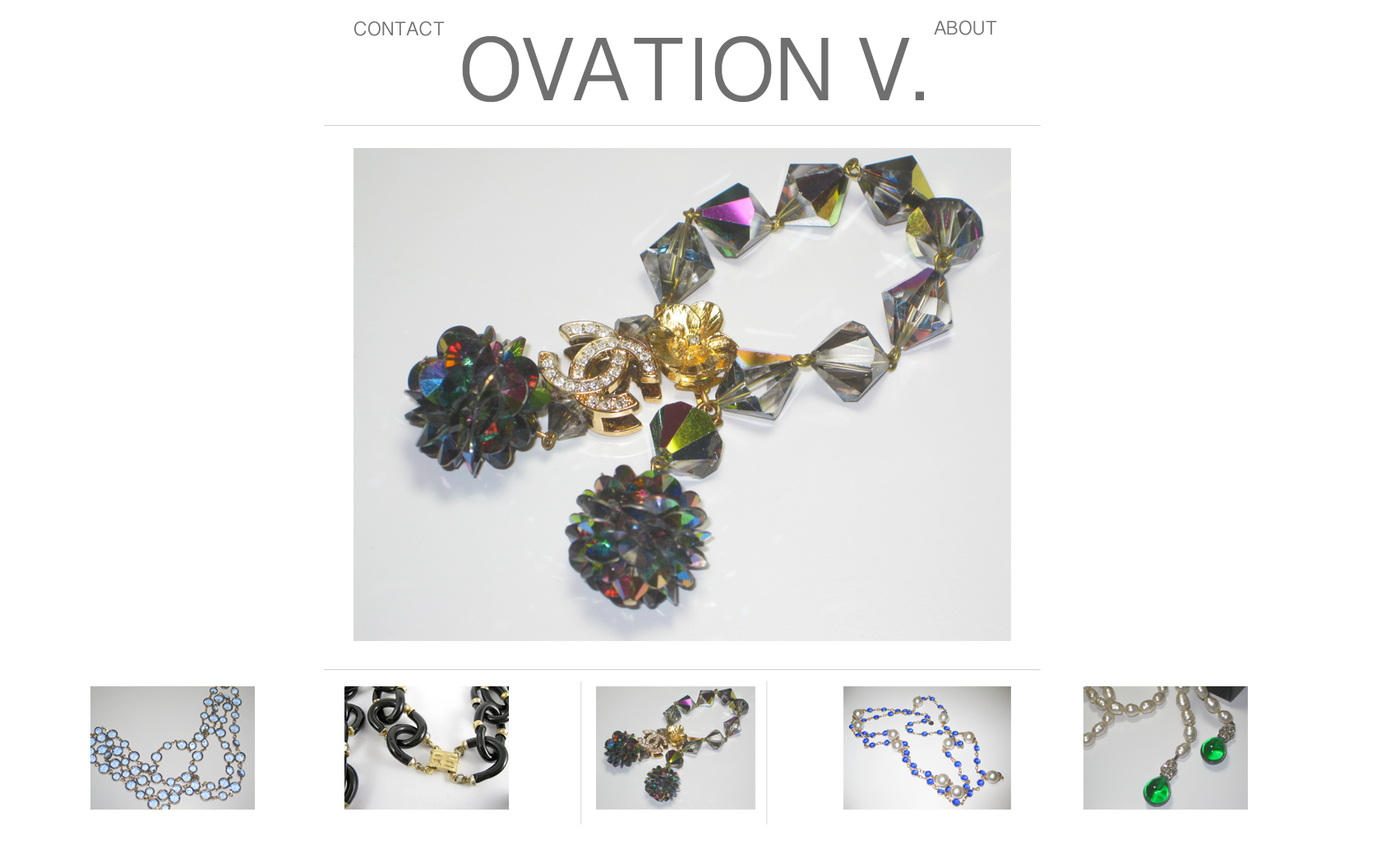
<style>
.page{position:relative;width:1381px;height:863px;background:#ffffff}
.page>*{position:absolute;margin:0}
.t1{font:19.7px "LaoSangamMN";color:#6f6f6f}
.t2{font:90.4px "LaoSangamMN";color:#6f6f6f}
</style>
<div class="page">
<p class="t1" style="left:354px;top:21px;width:91px;height:15px">CONTACT</p>
<p class="t1" style="left:934px;top:21px;width:63px;height:14px">ABOUT</p>
<p class="t2" style="left:462px;top:36px;width:462px;height:66px">OVATION V.</p>
</div>
